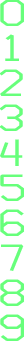
<style>
.page{position:relative;width:24px;height:341px;background:#ffffff}
.page>*{position:absolute;margin:0}
.t1{font:37.9px "HornetDisplay-Bold";color:#67ff7b;scale:1.35 1}
</style>
<div class="page">
<p class="t1" style="left:0px;top:0px;width:25px;height:26px">0</p>
<p class="t1" style="left:5px;top:34px;width:14px;height:27px">1</p>
<p class="t1" style="left:0px;top:69px;width:23px;height:27px">2</p>
<p class="t1" style="left:0px;top:104px;width:23px;height:27px">3</p>
<p class="t1" style="left:0px;top:139px;width:23px;height:27px">4</p>
<p class="t1" style="left:0px;top:174px;width:25px;height:27px">5</p>
<p class="t1" style="left:0px;top:209px;width:25px;height:27px">6</p>
<p class="t1" style="left:1px;top:244px;width:23px;height:27px">7</p>
<p class="t1" style="left:0px;top:279px;width:25px;height:27px">8</p>
<p class="t1" style="left:0px;top:314px;width:25px;height:27px">9</p>
</div>
